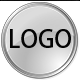
<style>
.page{position:relative;width:80px;height:80px;background:#ffffff}
.page>*{position:absolute;margin:0}
.t1{font:24px "AdobeHeitiStd-Regular";color:#040404}
</style>
<div class="page">
<p class="t1" style="left:10px;top:28px;width:61px;height:19px">LOGO</p>
</div>
